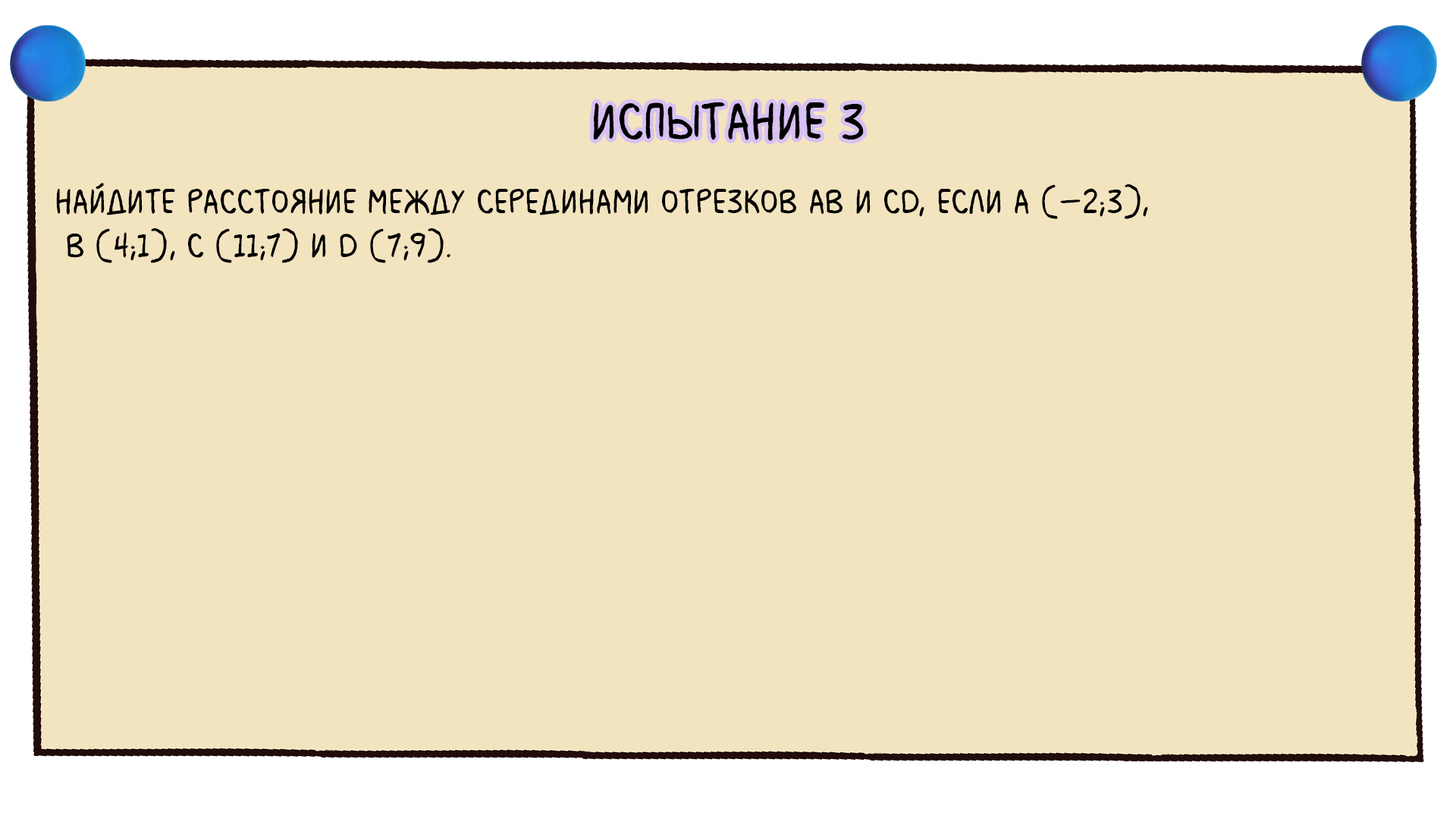
<style>
.page{position:relative;width:1456px;height:819px;background:#f3e4c0}
.page>*{position:absolute;margin:0}
.t1{font:54.6px "MilkMustacheBB";color:#000000}
.t2{font:36.4px "MilkMustacheBB";color:#000000}
</style>
<div class="page">
<p class="t1" style="left:593px;top:102px;width:271px;height:39px">испытание 3</p>
<p class="t2" style="left:56px;top:183px;width:1092px;height:80px">Найдите расстояние между серединами отрезков AB и СD, если А (–2;3),<br> В (4;1), C (11;7) и D (7;9).</p>
</div>
